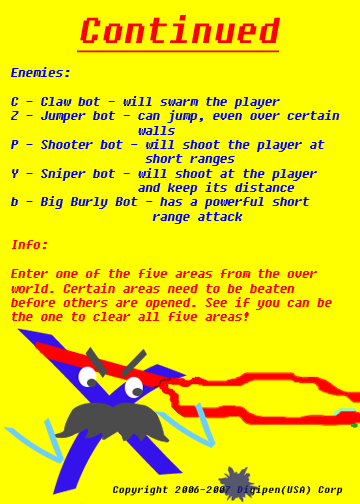
<style>
.page{position:relative;width:360px;height:504px;background:#ffff00}
.page>*{position:absolute;margin:0}
.t1{font:35.9px "Fixedsys";color:#ff0000;font-style:italic;text-decoration:underline}
.t2{font:12px "Fixedsys";color:#0000ff;font-style:italic}
.t3{font:12px "Fixedsys";color:#ff0000;font-style:italic}
.t4{font:10px "Fixedsys";color:#000000;font-style:italic}
</style>
<div class="page">
<p class="t1" style="left:77px;top:15px;width:203px;height:38px">Continued</p>
<p class="t2" style="left:11px;top:67px;width:329px;height:254px">Enemies:<br><br>C - Claw bot - will swarm the player<br>Z - Jumper bot - can jump, even over certain<br>                 walls<br>P - Shooter bot - will shoot the player at<br>                  short ranges<br>Y - Sniper bot - will shoot at the player <br>                 and keep its distance<br>b - Big Burly Bot - has a powerful short<br>                   range attack<br><br><span class="t3">Info:<br><br>Enter one of the five areas from the over world. Certain areas need to be beaten before others are opened. See if you can be the one to clear all five areas!</span></p>
<p class="t4" style="left:113px;top:485px;width:230px;height:11px">Copyright 2006-2007 Digipen(USA) Corp</p>
</div>
